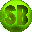
<style>
.page{position:relative;width:32px;height:32px}
.page>*{position:absolute;margin:0}
.t1{font:27px "PoplarStd"}
</style>
<div class="page">
<p class="t1" style="left:5px;top:5px;width:23px;height:20px">SB</p>
</div>
